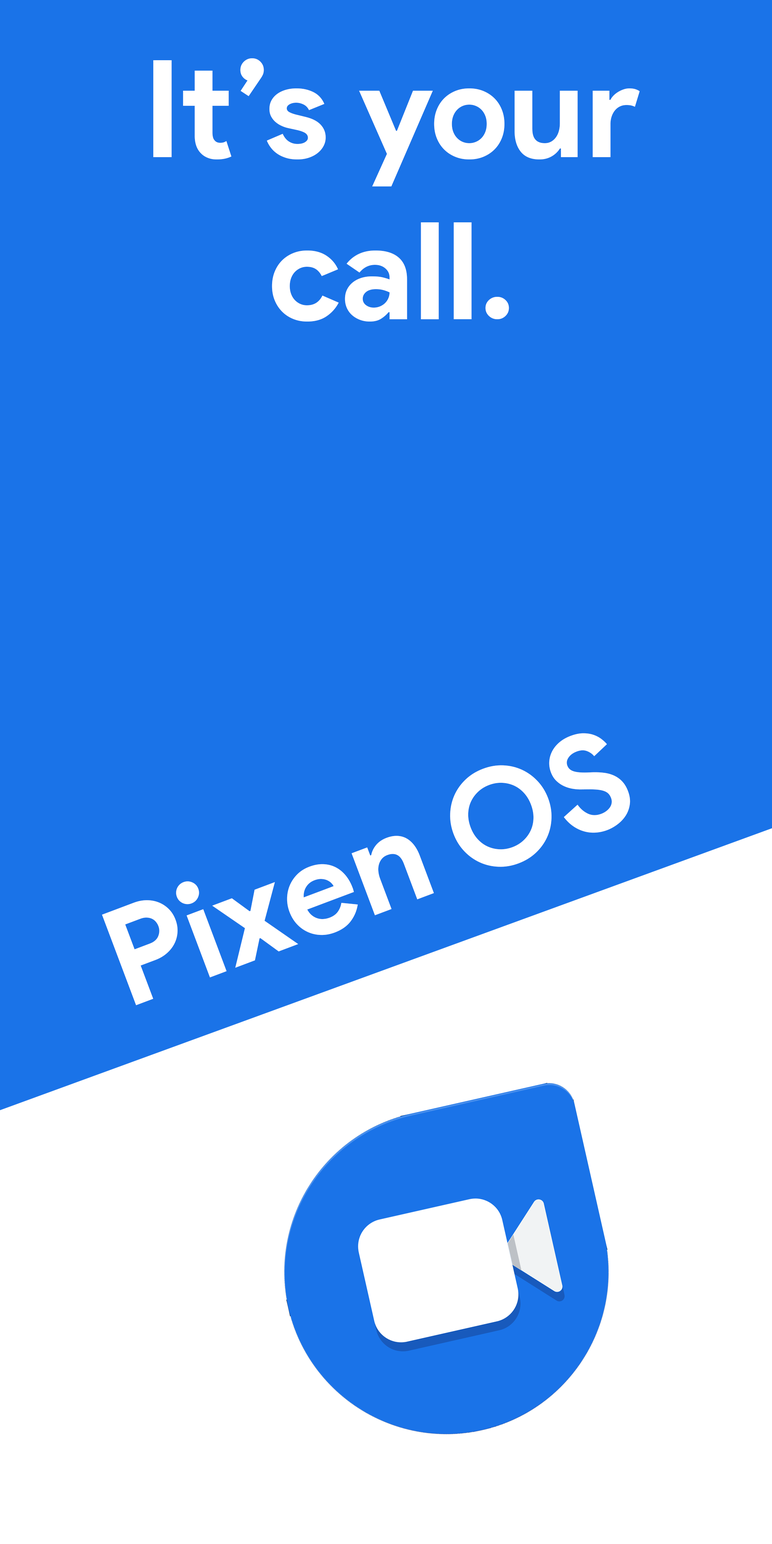
<style>
.page{position:relative;width:772px;height:1544px;background:#1a73e8}
.page>*{position:absolute;margin:0}
.t1{font:135.1px "ProductSans-Bold";color:#ffffff}
</style>
<div class="page">
<p class="t1" style="left:153px;top:58px;width:487px;height:264px;text-align:center">It’s your call.</p>
<p class="t1" style="left:102px;top:733px;width:528px;height:273px;rotate:-21deg">Pixen OS</p>
</div>
